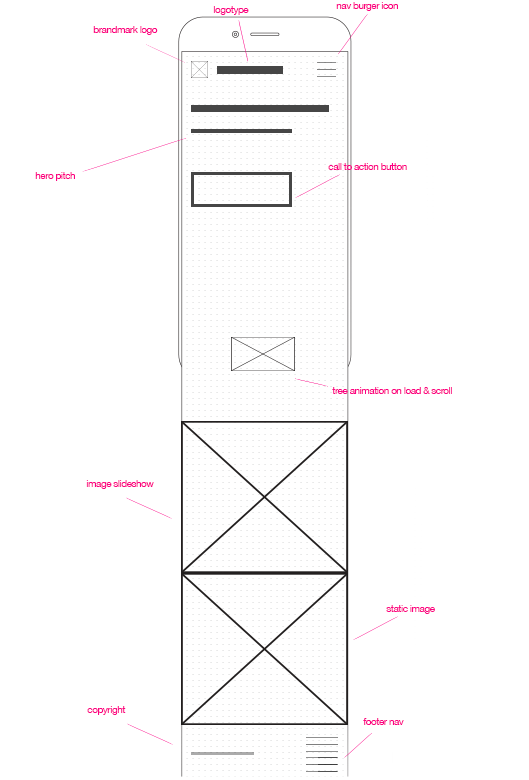
<style>
.page{position:relative;width:529px;height:780px;background:#ffffff}
.page>*{position:absolute;margin:0}
.t1{font:10px "HelveticaNeue";letter-spacing:-0.05em;color:#fc0183}
</style>
<div class="page">
<p class="t1" style="left:213px;top:6px;width:36px;height:9px">logotype</p>
<p class="t1" style="left:336px;top:2px;width:62px;height:9px">nav burger icon</p>
<p class="t1" style="left:93px;top:26px;width:65px;height:9px">brandmark logo</p>
<p class="t1" style="left:35px;top:172px;width:40px;height:9px">hero pitch</p>
<p class="t1" style="left:328px;top:163px;width:79px;height:7px">call to action button</p>
<p class="t1" style="left:332px;top:387px;width:120px;height:7px">tree animation on load &amp; scroll</p>
<p class="t1" style="left:86px;top:480px;width:68px;height:9px">image slideshow</p>
<p class="t1" style="left:386px;top:605px;width:49px;height:9px">static image</p>
<p class="t1" style="left:87px;top:706px;width:39px;height:9px">copyright</p>
<p class="t1" style="left:363px;top:718px;width:41px;height:7px">footer nav</p>
</div>
